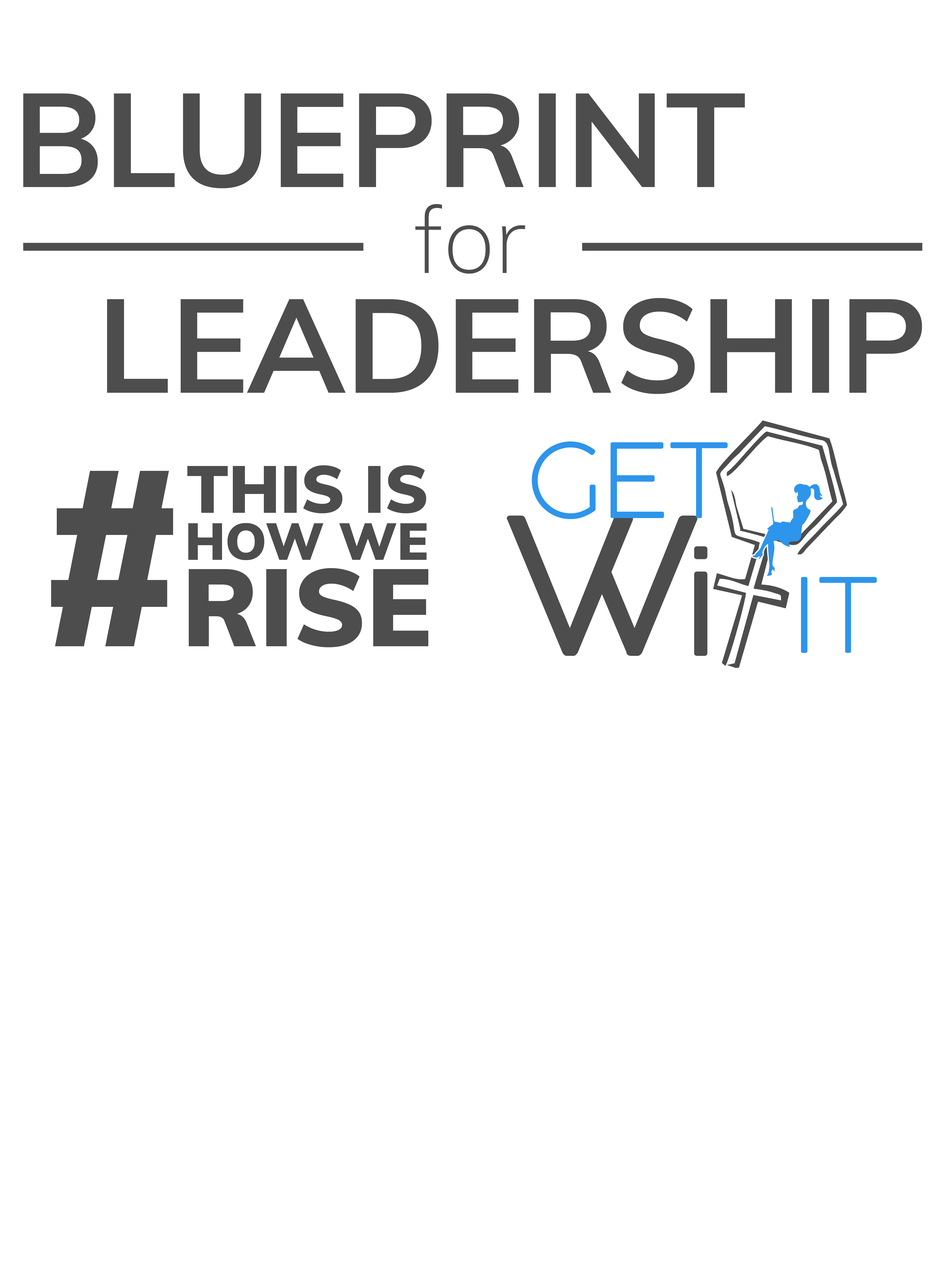
<style>
.page{position:relative;width:946px;height:1261px;background:#ffffff}
.page>*{position:absolute;margin:0}
.t1{font:131.3px "Muli-Bold";color:#4d4d4d}
.t2{font:93px "Muli-ExtraLight";color:#4d4d4d}
.t3{font:246.3px "Muli-Black";color:#4d4d4d}
.t4{font:65.7px "Muli-Black";color:#4d4d4d}
.t5{font:51.4px "Muli-Black";color:#4d4d4d}
.t6{font:108.4px "Muli-Black";color:#4d4d4d}
</style>
<div class="page">
<p class="t1" style="left:23px;top:93px;width:722px;height:95px">BLUEPRINT</p>
<p class="t2" style="left:415px;top:204px;width:110px;height:70px">for</p>
<p class="t1" style="left:107px;top:298px;width:815px;height:96px">LEADERSHIP</p>
<p class="t3" style="left:51px;top:471px;width:122px;height:175px">#</p>
<p class="t4" style="left:187px;top:465px;width:239px;height:48px">THIS IS</p>
<p class="t5" style="left:188px;top:523px;width:239px;height:37px">HOW WE</p>
<p class="t6" style="left:189px;top:568px;width:239px;height:79px">RISE</p>
</div>
